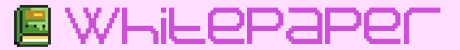
<style>
.page{position:relative;width:460px;height:50px;background:#ffddff}
.page>*{position:absolute;margin:0}
.t1{font:41.7px "Mario-Paint";color:#ca50d6}
</style>
<div class="page">
<p class="t1" style="left:65px;top:7px;width:376px;height:37px">Whitepaper</p>
</div>
